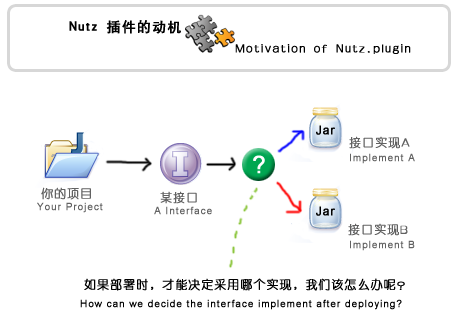
<style>
.page{position:relative;width:457px;height:335px;background:#ffffff}
.page>*{position:absolute;margin:0}
.t1{font:14px "HYb1gj";letter-spacing:0.08em;color:#000000;font-weight:bold}
.t2{font:12px "HYe2gj";letter-spacing:0.08em;color:#000000;font-weight:bold}
.t3{font:12px "HYe2gj";letter-spacing:0.08em;color:#626262;font-weight:bold}
.t4{font:24px "ArialMT";letter-spacing:0.08em;color:#ffffff;font-weight:bold}
.t5{font:10px "ArialMT";letter-spacing:0.08em;color:#626262;font-weight:bold}
.t6{font:10px "ArialMT";letter-spacing:0.08em;color:#000000;font-weight:bold}
</style>
<div class="page">
<p class="t1" style="left:69px;top:20px;width:112px;height:14px">Nutz 插件的动机</p>
<p class="t2" style="left:235px;top:44px;width:176px;height:10px">Motivation of Nutz.plugin</p>
<p class="t3" style="left:349px;top:136px;width:61px;height:13px">接口实现A</p>
<p class="t4" style="left:253px;top:155px;width:12px;height:19px">?</p>
<p class="t5" style="left:350px;top:153px;width:65px;height:11px">Implement A</p>
<p class="t3" style="left:41px;top:187px;width:50px;height:13px">你的项目</p>
<p class="t3" style="left:160px;top:191px;width:37px;height:13px">某接口</p>
<p class="t5" style="left:37px;top:202px;width:66px;height:11px">Your Project</p>
<p class="t5" style="left:154px;top:206px;width:58px;height:9px">A Interface</p>
<p class="t3" style="left:348px;top:223px;width:60px;height:13px">接口实现B</p>
<p class="t5" style="left:350px;top:240px;width:65px;height:11px">Implement B</p>
<p class="t2" style="left:84px;top:278px;width:321px;height:13px">如果部署时，才能决定采用哪个实现，我们该怎么办呢？</p>
<p class="t6" style="left:80px;top:299px;width:322px;height:11px">How can we decide the interface implement after deploying?</p>
</div>
